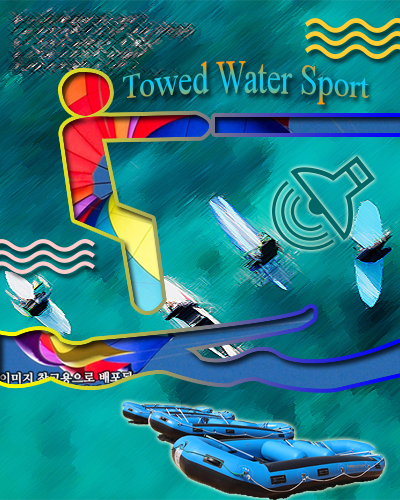
<style>
.page{position:relative;width:400px;height:500px}
.page>*{position:absolute;margin:0}
.t1{font:31.6px "TimesNewRomanPSMT"}
</style>
<div class="page">
<p class="t1" style="left:122px;top:61px;width:248px;height:44px">Towed Water Sport</p>
</div>
